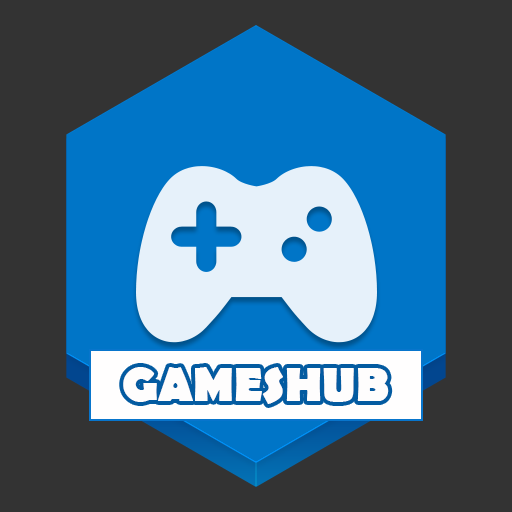
<style>
.page{position:relative;width:512px;height:512px;background:#333333}
.page>*{position:absolute;margin:0}
.t1{font:48px "BerlinSansFB-Bold";color:#fefdfd}
</style>
<div class="page">
<p class="t1" style="left:123px;top:367px;width:266px;height:37px">GAMESHUB</p>
</div>
